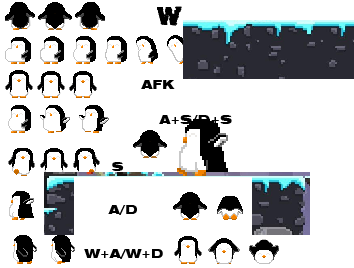
<style>
.page{position:relative;width:354px;height:268px;background:#ffffff}
.page>*{position:absolute;margin:0}
.t1{font:22.6px "Base05";color:#000000}
.t2{font:12px "Swiss721BT-BlackExtended";color:#000000}
</style>
<div class="page">
<p class="t1" style="left:157px;top:6px;width:25px;height:20px">W</p>
<p class="t2" style="left:141px;top:80px;width:34px;height:9px">AFK</p>
<p class="t2" style="left:159px;top:115px;width:73px;height:10px">A+S/D+S</p>
<p class="t2" style="left:112px;top:162px;width:12px;height:9px">S</p>
<p class="t2" style="left:108px;top:205px;width:29px;height:10px">A/D</p>
<p class="t2" style="left:84px;top:249px;width:79px;height:10px">W+A/W+D</p>
</div>
